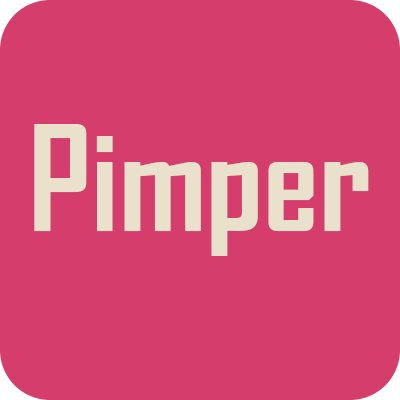
<style>
.page{position:relative;width:400px;height:400px;background:#d43d6c}
.page>*{position:absolute;margin:0}
.t1{font:140px "AgencyFB-Bold";color:#e9e1cc}
</style>
<div class="page">
<p class="t1" style="left:34px;top:124px;width:335px;height:132px">Pimper</p>
</div>
